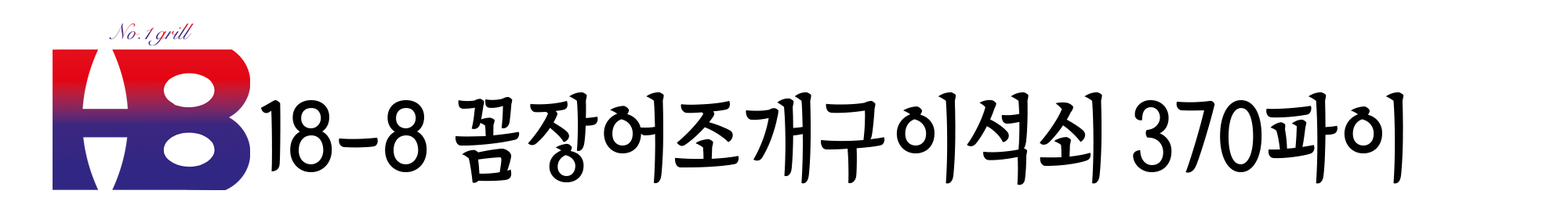
<style>
.page{position:relative;width:1568px;height:205px;background:#ffffff}
.page>*{position:absolute;margin:0}
.t1{font:93.7px "TheIndependenceHallofKorea-Regular";color:#000000;scale:0.89 1}
</style>
<div class="page">
<p class="t1" style="left:261px;top:93px;width:1143px;height:93px">18-8 꼼장어조개구이석쇠 370파이</p>
</div>
